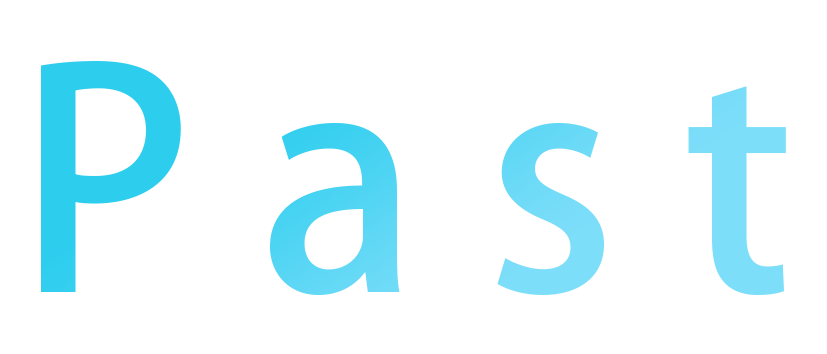
<style>
.page{position:relative;width:827px;height:354px;background:#ffffff}
.page>*{position:absolute;margin:0}
.t1{font:300px "AdobeHeitiStd-Regular"}
</style>
<div class="page">
<p class="t1" style="left:41px;top:61px;width:745px;height:234px">P a s t</p>
</div>
